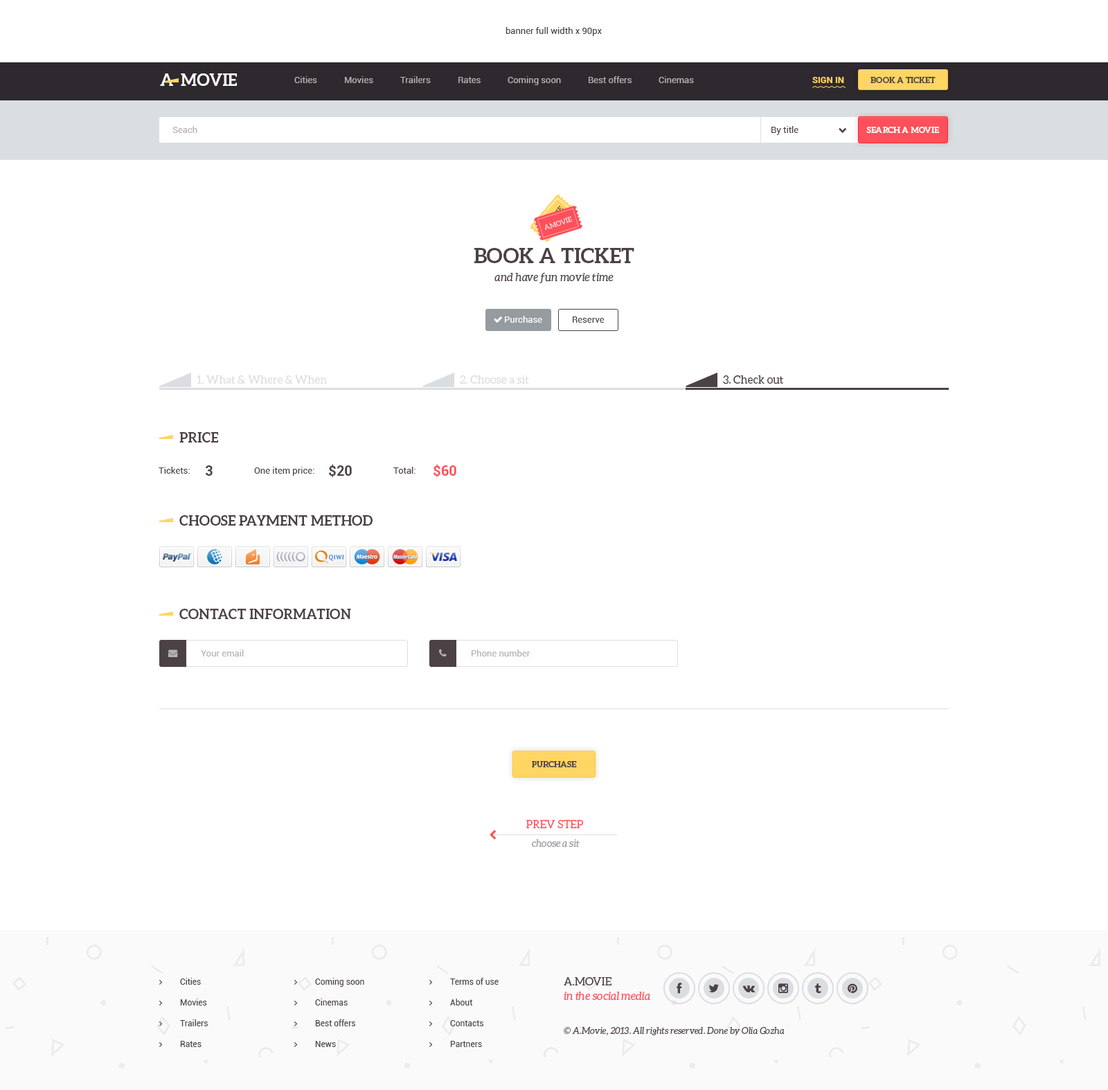
<style>
.page{position:relative;width:1108px;height:1090px;background:#ffffff}
.page>*{position:absolute;margin:0}
.t1{font:9px "Roboto-Regular";color:#4c4145}
.t2{font:16.6px "Aleo-Bold";color:#ffffff;text-transform:uppercase}
.t3{font:9px "Roboto-Regular";color:#b4b1b2}
.t4{font:9px "Roboto-Bold";color:#ffd564;text-transform:uppercase}
.t5{font:8.3px "Aleo-Bold";color:#4c4145;text-transform:uppercase}
.t6{font:8.3px "Aleo-Bold";color:#ffffff;text-transform:uppercase}
.t7{font:6.9px "Aleo-Regular";color:#fe505a;text-transform:uppercase}
.t8{font:6.9px "Aleo-Regular";color:#ffd5d7;text-transform:uppercase}
.t9{font:11.1px/18px "Aleo-Italic";color:#4c4145}
.t10{font:20.8px/18px "Aleo-Bold";color:#4c4145;text-transform:uppercase}
.t11{font:9px "Roboto-Regular";color:#ffffff}
.t12{font:11.1px "Aleo-Regular";color:#dbdee1}
.t13{font:11.1px "Aleo-Regular";color:#4c4145}
.t14{font:13.8px "Aleo-Bold";color:#4c4145;text-transform:uppercase}
.t15{font:13.8px "Roboto-Bold";color:#4c4145}
.t16{font:13.8px "Roboto-Bold";color:#fe505a}
.t17{font:11.1px "Aleo-Regular";color:#fe505a;text-transform:uppercase}
.t18{font:9.7px "Aleo-Italic";color:#969b9f}
.t19{font:8.3px "Roboto-Regular";color:#4c4145}
.t20{font:11.1px/14.5px "Aleo-Italic";color:#fe505a}
.t21{font:11.1px/14.5px "Aleo-Regular";color:#4c4145;text-transform:uppercase}
.t22{font:9px "Aleo-Italic";color:#4c4145}
</style>
<div class="page">
<p class="t1" style="left:505px;top:27px;width:97px;height:9px">banner full width x 90px</p>
<p class="t2" style="left:160px;top:73px;width:13px;height:13px">A</p>
<p class="t2" style="left:181px;top:73px;width:56px;height:13px">movie</p>
<p class="t3" style="left:294px;top:76px;width:23px;height:7px">Cities</p>
<p class="t3" style="left:345px;top:76px;width:28px;height:7px">Movies</p>
<p class="t3" style="left:400px;top:76px;width:31px;height:7px">Trailers</p>
<p class="t3" style="left:458px;top:77px;width:22px;height:6px">Rates</p>
<p class="t3" style="left:507px;top:76px;width:54px;height:9px">Coming soon</p>
<p class="t3" style="left:588px;top:76px;width:43px;height:7px">Best offers</p>
<p class="t3" style="left:658px;top:76px;width:36px;height:7px">Cinemas</p>
<p class="t4" style="left:812px;top:77px;width:32px;height:6px">Sign in</p>
<p class="t5" style="left:870px;top:77px;width:65px;height:6px">Book a ticket</p>
<p class="t3" style="left:172px;top:126px;width:25px;height:7px">Seach</p>
<p class="t1" style="left:771px;top:126px;width:27px;height:9px">By title</p>
<p class="t6" style="left:866px;top:127px;width:73px;height:6px">search a movie</p>
<p class="t7" style="left:542px;top:206px;width:22px;height:25px;rotate:-50deg">amovie</p>
<p class="t8" style="left:545px;top:216px;width:28px;height:14px;rotate:-17deg">amovie</p>
<p class="t9" style="left:474px;top:248px;width:160px;height:35px;text-align:center"><span class="t10">Book a ticket<br></span>and have fun movie time</p>
<p class="t11" style="left:505px;top:316px;width:37px;height:7px">Purchase</p>
<p class="t1" style="left:573px;top:316px;width:31px;height:7px">Reserve</p>
<p class="t12" style="left:197px;top:375px;width:130px;height:9px">1. What &amp; Where &amp; When</p>
<p class="t12" style="left:460px;top:375px;width:69px;height:9px">2. Choose a sit</p>
<p class="t13" style="left:723px;top:375px;width:60px;height:9px">3. Check out</p>
<p class="t14" style="left:179px;top:432px;width:39px;height:10px">price</p>
<p class="t1" style="left:159px;top:467px;width:31px;height:7px">Tickets:</p>
<p class="t15" style="left:205px;top:465px;width:8px;height:11px">3</p>
<p class="t1" style="left:254px;top:467px;width:60px;height:9px">One item price:</p>
<p class="t15" style="left:329px;top:464px;width:23px;height:13px">$20</p>
<p class="t1" style="left:393px;top:467px;width:22px;height:7px">Total:</p>
<p class="t16" style="left:433px;top:464px;width:23px;height:13px">$60</p>
<p class="t14" style="left:179px;top:515px;width:193px;height:10px">Choose payment method</p>
<p class="t14" style="left:179px;top:609px;width:172px;height:10px">Contact information</p>
<p class="t3" style="left:201px;top:649px;width:43px;height:7px">Your email</p>
<p class="t3" style="left:471px;top:649px;width:59px;height:7px">Phone number</p>
<p class="t5" style="left:532px;top:761px;width:45px;height:6px">purchase</p>
<p class="t17" style="left:526px;top:820px;width:57px;height:8px">prev step</p>
<p class="t18" style="left:532px;top:839px;width:47px;height:8px">choose a sit</p>
<p class="t19" style="left:180px;top:978px;width:21px;height:6px">Cities</p>
<p class="t19" style="left:315px;top:978px;width:49px;height:9px">Coming soon</p>
<p class="t19" style="left:450px;top:978px;width:48px;height:6px">Terms of use</p>
<p class="t20" style="left:564px;top:977px;width:86px;height:23px"><span class="t21">A.Movie <br></span>in the social media</p>
<p class="t19" style="left:180px;top:998px;width:27px;height:7px">Movies</p>
<p class="t19" style="left:315px;top:998px;width:33px;height:7px">Cinemas</p>
<p class="t19" style="left:450px;top:998px;width:23px;height:7px">About</p>
<p class="t19" style="left:180px;top:1019px;width:28px;height:7px">Trailers</p>
<p class="t19" style="left:315px;top:1019px;width:40px;height:7px">Best offers</p>
<p class="t19" style="left:450px;top:1020px;width:33px;height:6px">Contacts</p>
<p class="t22" style="left:564px;top:1027px;width:220px;height:8px">© A.Movie, 2013. All rights reserved. Done by Olia Gozha</p>
<p class="t19" style="left:180px;top:1041px;width:21px;height:6px">Rates</p>
<p class="t19" style="left:315px;top:1041px;width:21px;height:6px">News</p>
<p class="t19" style="left:450px;top:1041px;width:32px;height:6px">Partners</p>
</div>
